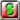
<style>
.page{position:relative;width:20px;height:20px}
.page>*{position:absolute;margin:0}
.t1{font:14px "GothicXB-HM";font-weight:bold}
</style>
<div class="page">
<p class="t1" style="left:7px;top:4px;width:7px;height:11px">S</p>
</div>
